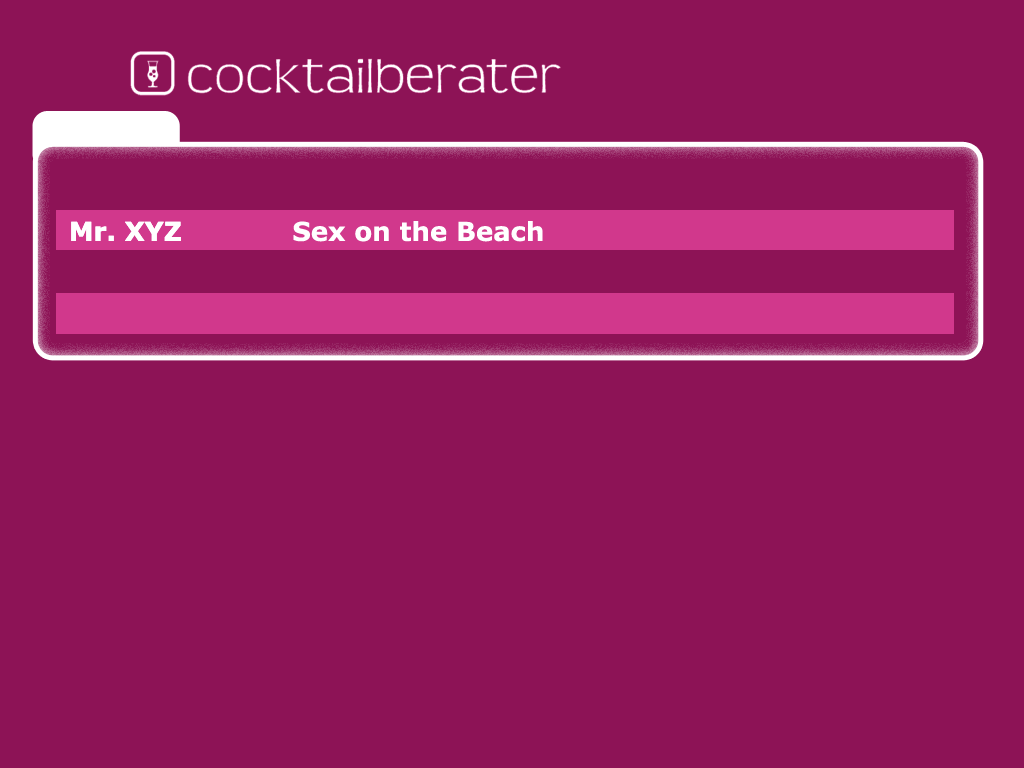
<style>
.page{position:relative;width:1024px;height:768px;background:#8d1356}
.page>*{position:absolute;margin:0}
.t1{font:26px "Verdana-Bold";color:#ffffff}
</style>
<div class="page">
<p class="t1" style="left:71px;top:221px;width:110px;height:20px">Mr. XYZ</p>
<p class="t1" style="left:71px;top:221px;width:110px;height:20px">Mr. XYZ</p>
<p class="t1" style="left:293px;top:221px;width:250px;height:21px">Sex on the Beach</p>
</div>
